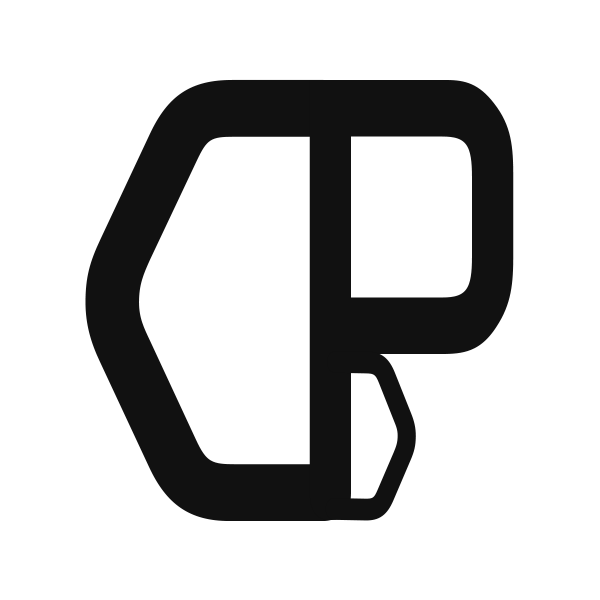
<style>
.page{position:relative;width:600px;height:600px;background:#ffffff}
.page>*{position:absolute;margin:0}
.t1{font:136.1px "OCRAStd";color:#111111;scale:0.94 1}
.t2{font:135.6px "OCRAStd";color:#111111;scale:0.73 1}
.t3{font:216.9px "OCRAStd";color:#111111;scale:0.83 1}
</style>
<div class="page">
<p class="t1" style="left:85px;top:79px;width:266px;height:442px">C</p>
<p class="t2" style="left:309px;top:80px;width:205px;height:440px">P</p>
<p class="t3" style="left:325px;top:351px;width:91px;height:170px;rotate:-179deg">C</p>
</div>
